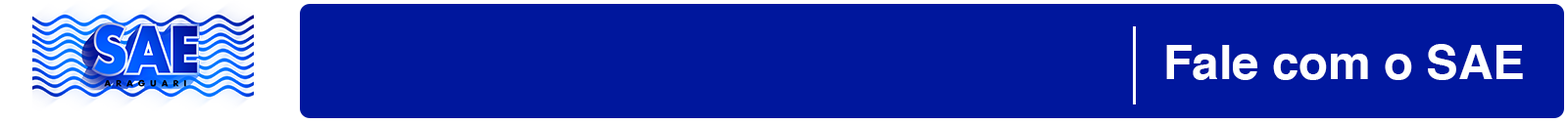
<style>
.page{position:relative;width:1568px;height:124px;background:#00179d}
.page>*{position:absolute;margin:0}
.t1{font:48px "Helvetica-Bold";color:#ffffff}
</style>
<div class="page">
<p class="t1" style="left:1166px;top:44px;width:357px;height:36px">Fale com o SAE</p>
</div>
